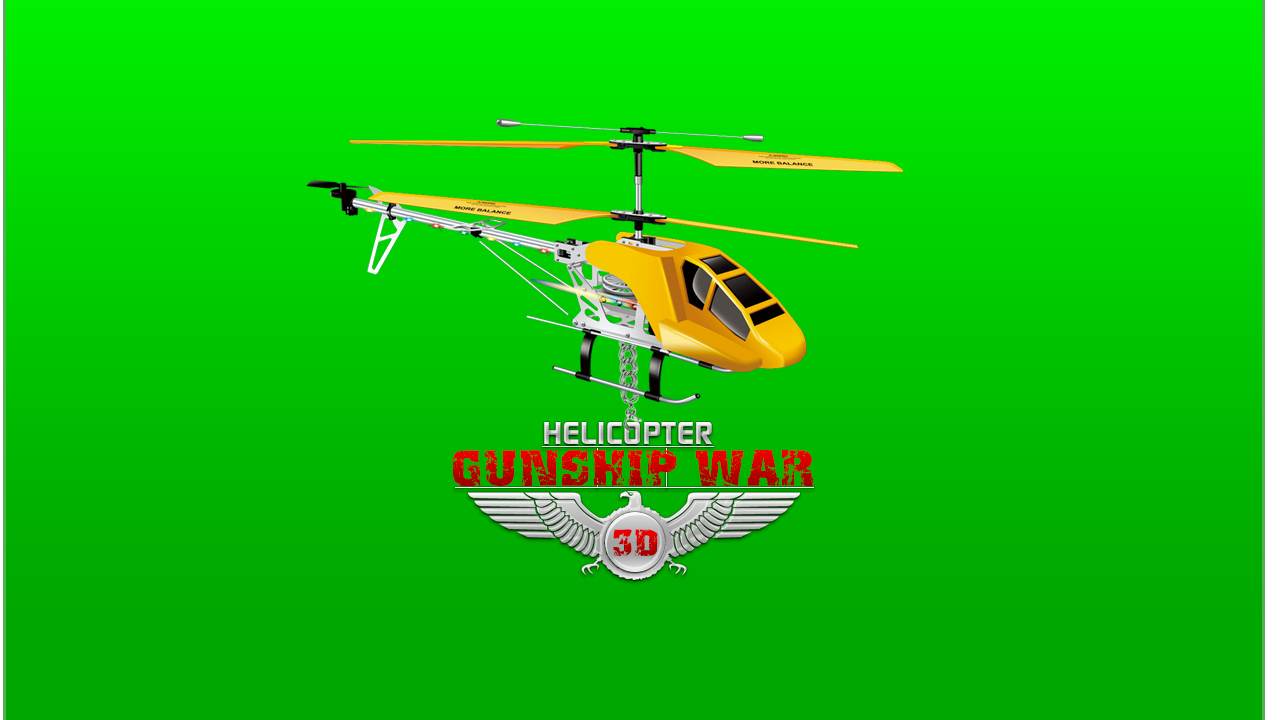
<style>
.page{position:relative;width:1280px;height:720px}
.page>*{position:absolute;margin:0}
.t1{font:43.8px "Distress";letter-spacing:0.017em}
.t2{font:32.5px "Distress";letter-spacing:0.017em}
</style>
<div class="page">
<p class="t1" style="left:452px;top:449px;width:362px;height:38px">GUNSHIP WAR</p>
<p class="t2" style="left:613px;top:529px;width:45px;height:27px">3D</p>
</div>
